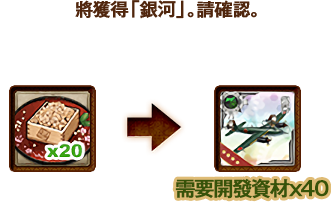
<style>
.page{position:relative;width:331px;height:202px;background:#ffffff}
.page>*{position:absolute;margin:0}
.t1{font:18px "GothicMB101Pr6N-Medium";letter-spacing:-0.04em;color:#50260d;font-weight:bold}
.t2{font:20px "GothicMB101Pr6N-Medium";letter-spacing:-0.08em;color:#375309;font-weight:bold}
</style>
<div class="page">
<p class="t1" style="left:75px;top:0px;width:182px;height:19px">將獲得「銀河」。請確認。</p>
<p class="t2" style="left:175px;top:178px;width:154px;height:21px">需要開發資材x40</p>
</div>
